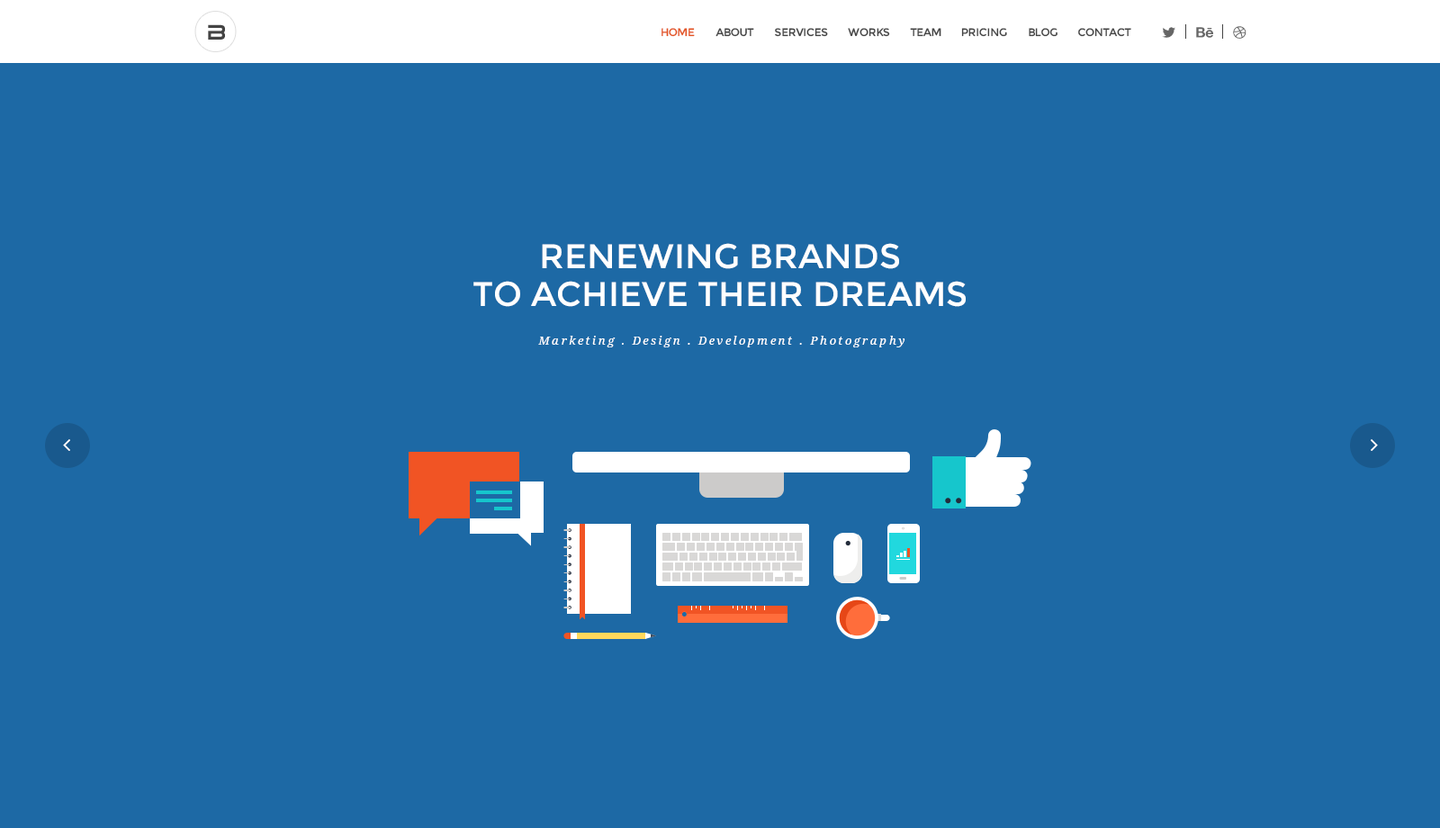
<style>
.page{position:relative;width:1440px;height:828px;background:#1d69a5}
.page>*{position:absolute;margin:0}
.t1{font:21.6px "Tele-MarinesBold";color:#444444}
.t2{font:10.8px "Montserrat-Regular";letter-spacing:-0.025em;color:#e35421}
.t3{font:10.8px "Montserrat-Regular";letter-spacing:-0.025em;color:#444444}
.t4{font:34.2px/37.6px "Montserrat-Regular";color:#ffffff}
.t5{font:11.7px "DroidSerif-Italic";letter-spacing:0.2em;color:#ffffff}
</style>
<div class="page">
<p class="t1" style="left:208px;top:24px;width:17px;height:16px">B</p>
<p class="t2" style="left:662px;top:28px;width:33px;height:9px">HOME</p>
<p class="t3" style="left:716px;top:28px;width:38px;height:9px">ABOUT</p>
<p class="t3" style="left:775px;top:28px;width:53px;height:9px">SERVICES</p>
<p class="t3" style="left:848px;top:28px;width:42px;height:9px">WORKS</p>
<p class="t3" style="left:910px;top:28px;width:31px;height:9px">TEAM</p>
<p class="t3" style="left:961px;top:28px;width:46px;height:9px">PRICING</p>
<p class="t3" style="left:1029px;top:28px;width:29px;height:9px">BLOG</p>
<p class="t3" style="left:1078px;top:28px;width:53px;height:9px">CONTACT</p>
<p class="t4" style="left:473px;top:243px;width:493px;height:64px;text-align:center">RENEWING BRANDS<br>TO ACHIEVE THEIR DREAMS</p>
<p class="t5" style="left:538px;top:336px;width:367px;height:11px">Marketing . Design . Development . Photography</p>
</div>
